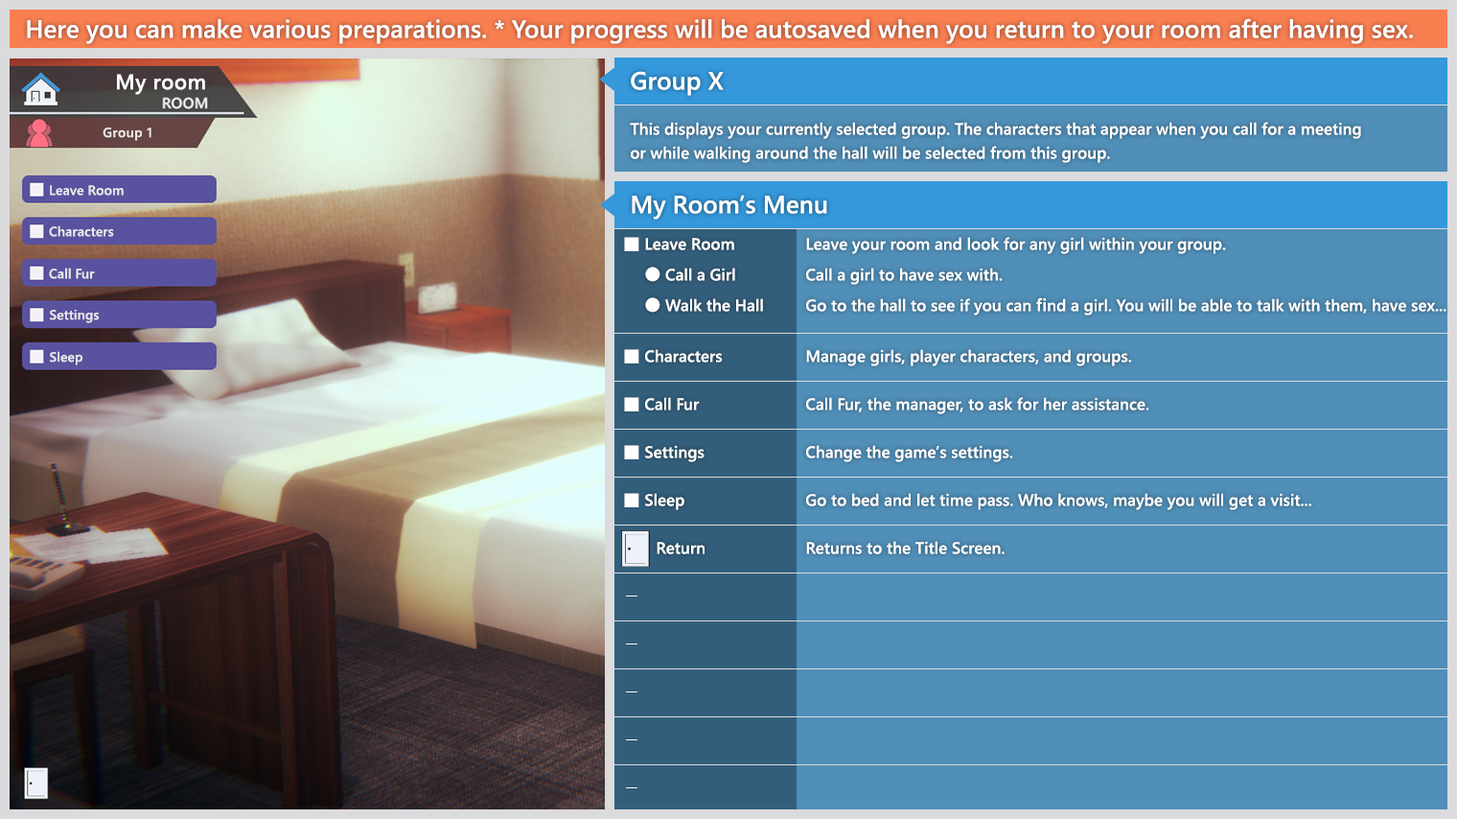
<style>
.page{position:relative;width:1457px;height:819px;background:#508fb8}
.page>*{position:absolute;margin:0}
.t1{font:24.9px "YuGothicUI-Semibold";color:#ffffff}
.t2{font:21.1px "YuGothicUI-Semibold";letter-spacing:0.025em;color:#ffffff}
.t3{font:16.3px/24px "YuGothicUI-Semibold";color:#ffffff}
.t4{font:13.4px "YuGothicUI-Semibold";letter-spacing:0.025em;color:#eae8e8}
.t5{font:13.4px "YuGothicUI-Semibold";letter-spacing:0.005em;color:#eae8e8}
.t6{font:16.3px/30.7px "YuGothicUI-Semibold";color:#ffffff}
.t7{font:16.3px "YuGothicUI-Semibold";color:#ffffff}
</style>
<div class="page">
<p class="t1" style="left:27px;top:18px;width:1386px;height:26px">Here you can make various preparations. * Your progress will be autosaved when you return to your room after having sex.</p>
<p class="t2" style="left:117px;top:74px;width:88px;height:21px">My room</p>
<p class="t1" style="left:631px;top:71px;width:93px;height:25px">Group X</p>
<p class="t3" style="left:630px;top:122px;width:731px;height:41px">This displays your currently selected group. The characters that appear when you call for a meeting<br>or while walking around the hall will be selected from this group.</p>
<p class="t4" style="left:103px;top:127px;width:48px;height:14px">Group 1</p>
<p class="t5" style="left:50px;top:185px;width:74px;height:11px">Leave Room</p>
<p class="t1" style="left:632px;top:195px;width:195px;height:24px">My Room’s Menu</p>
<p class="t5" style="left:49px;top:225px;width:65px;height:12px">Characters</p>
<p class="t6" style="left:645px;top:238px;width:118px;height:74px">Leave Room<br>● Call a Girl<br>● Walk the Hall</p>
<p class="t6" style="left:806px;top:237px;width:640px;height:78px">Leave your room and look for any girl within your group.<br>Call a girl to have sex with.<br>Go to the hall to see if you can find a girl. You will be able to talk with them, have sex...</p>
<p class="t5" style="left:49px;top:267px;width:46px;height:12px">Call Fur</p>
<p class="t5" style="left:50px;top:309px;width:49px;height:14px">Settings</p>
<p class="t5" style="left:50px;top:351px;width:32px;height:14px">Sleep</p>
<p class="t7" style="left:645px;top:349px;width:78px;height:13px">Characters</p>
<p class="t7" style="left:806px;top:349px;width:326px;height:17px">Manage girls, player characters, and groups.</p>
<p class="t7" style="left:645px;top:397px;width:55px;height:13px">Call Fur</p>
<p class="t7" style="left:806px;top:397px;width:343px;height:17px">Call Fur, the manager, to ask for her assistance.</p>
<p class="t7" style="left:645px;top:445px;width:59px;height:17px">Settings</p>
<p class="t7" style="left:806px;top:445px;width:207px;height:17px">Change the game’s settings.</p>
<p class="t7" style="left:645px;top:493px;width:39px;height:17px">Sleep</p>
<p class="t7" style="left:806px;top:493px;width:505px;height:17px">Go to bed and let time pass. Who knows, maybe you will get a visit...</p>
<p class="t7" style="left:657px;top:542px;width:47px;height:12px">Return</p>
<p class="t7" style="left:806px;top:541px;width:198px;height:13px">Returns to the Title Screen.</p>
</div>
